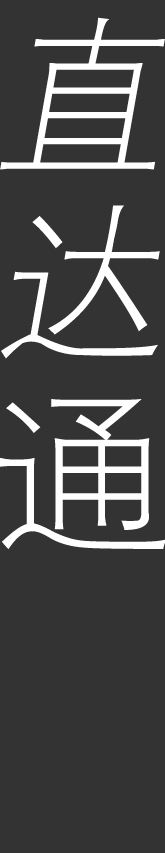
<style>
.page{position:relative;width:165px;height:853px;background:#333333}
.page>*{position:absolute;margin:0}
.t1{font:170px "FZXDXJW--GB1-0";letter-spacing:0.1em;color:#ffffff;font-style:italic}
.t2{font:180px "FZXDXJW--GB1-0";letter-spacing:0.1em;color:#ffffff}
</style>
<div class="page">
<p class="t1" style="left:0px;top:17px;width:165px;height:342px">直达</p>
<p class="t2" style="left:0px;top:399px;width:167px;height:150px">通</p>
</div>
